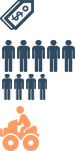
<style>
.page{position:relative;width:75px;height:151px;background:#ffffff}
.page>*{position:absolute;margin:0}
.t1{font:16px "OpenSans";color:#34495e}
</style>
<div class="page">
<p class="t1" style="left:11px;top:11px;width:13px;height:10px;rotate:56deg">$</p>
</div>
